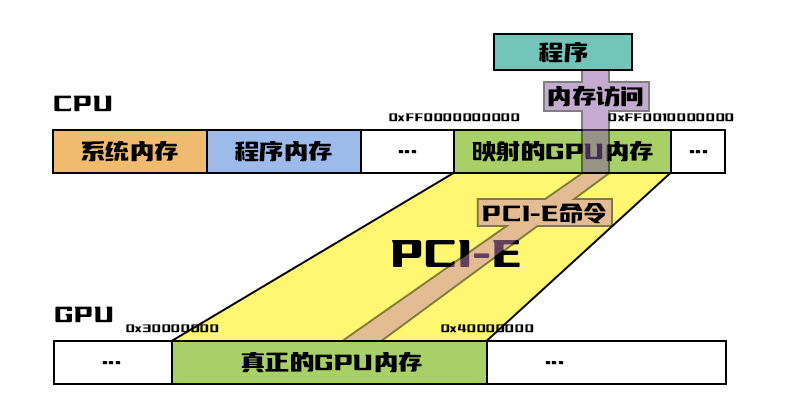
<style>
.page{position:relative;width:800px;height:400px;background:#ffffff}
.page>*{position:absolute;margin:0}
.t1{font:28px "YouSheBiaoTiYuan";letter-spacing:-0.05em;color:#000000}
.t2{font:14px "YouSheBiaoTiYuan";letter-spacing:-0.05em;color:#000000}
.t3{font:48px "YouSheBiaoTiYuan";letter-spacing:-0.05em;color:#000000}
</style>
<div class="page">
<p class="t1" style="left:539px;top:42px;width:49px;height:21px">程序</p>
<p class="t1" style="left:548px;top:86px;width:95px;height:21px">内存访问</p>
<p class="t1" style="left:54px;top:95px;width:58px;height:17px">CPU</p>
<p class="t2" style="left:389px;top:113px;width:131px;height:9px">0xFF0000000000</p>
<p class="t2" style="left:608px;top:113px;width:126px;height:9px">0xFF0010000000</p>
<p class="t1" style="left:81px;top:141px;width:97px;height:21px">系统内存</p>
<p class="t1" style="left:235px;top:141px;width:97px;height:21px">程序内存</p>
<p class="t1" style="left:398px;top:150px;width:19px;height:4px">...</p>
<p class="t1" style="left:472px;top:141px;width:181px;height:21px">映射的GPU内存</p>
<p class="t1" style="left:689px;top:150px;width:19px;height:4px">...</p>
<p class="t1" style="left:482px;top:203px;width:124px;height:21px">PCI-E命令</p>
<p class="t3" style="left:392px;top:240px;width:128px;height:27px">PCI-E</p>
<p class="t1" style="left:55px;top:306px;width:58px;height:17px">GPU</p>
<p class="t2" style="left:126px;top:324px;width:93px;height:9px">0x30000000</p>
<p class="t2" style="left:441px;top:324px;width:93px;height:9px">0x40000000</p>
<p class="t1" style="left:241px;top:352px;width:181px;height:21px">真正的GPU内存</p>
<p class="t1" style="left:102px;top:361px;width:19px;height:4px">...</p>
<p class="t1" style="left:545px;top:361px;width:19px;height:4px">...</p>
</div>
